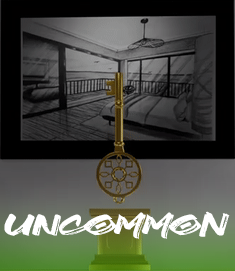
<style>
.page{position:relative;width:235px;height:271px}
.page>*{position:absolute;margin:0}
.t1{font:28px "NorthZone";color:#ffffff;scale:1.2 1}
</style>
<div class="page">
<p class="t1" style="left:4px;top:211px;width:226px;height:28px">UNcommon</p>
</div>
